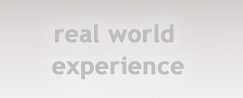
<style>
.page{position:relative;width:243px;height:98px}
.page>*{position:absolute;margin:0}
.t1{font:24px/32px "TrebuchetMS-Bold";color:#bebebe;font-weight:bold}
</style>
<div class="page">
<p class="t1" style="left:52px;top:24px;width:132px;height:56px;text-align:center">real world <br>experience</p>
</div>
